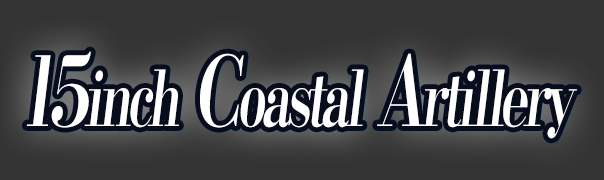
<style>
.page{position:relative;width:604px;height:180px;background:#333333}
.page>*{position:absolute;margin:0}
.t1{font:76.8px "KochoStd-Heavy";letter-spacing:-0.08em;color:#ffffff;font-style:italic;scale:0.68 1}
.t2{font:96px "KochoStd-Heavy";letter-spacing:-0.08em;color:#ffffff;font-style:italic;scale:0.68 1}
</style>
<div class="page">
<p class="t1" style="left:26px;top:51px;width:551px;height:88px"><span class="t2">15</span>inch<span class="t2"> C</span>oastal<span class="t2"> A</span>rtillery</p>
</div>
